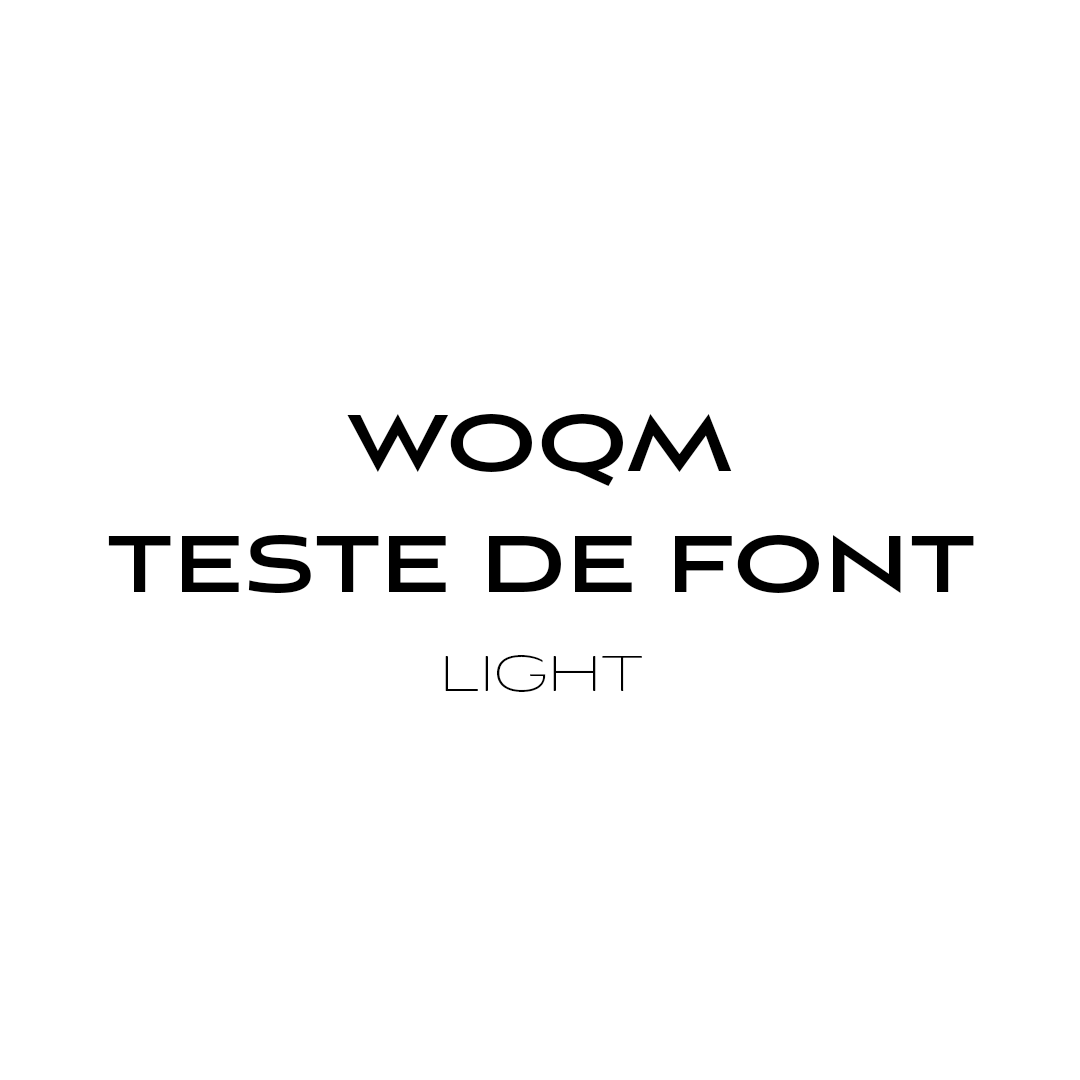
<style>
.page{position:relative;width:1080px;height:1080px;background:#ffffff}
.page>*{position:absolute;margin:0}
.t1{font:100.5px "AvianoSansBold";color:#000000;text-transform:uppercase}
.t2{font:62.3px "AvianoSansThin";color:#000000;text-transform:uppercase}
</style>
<div class="page">
<p class="t1" style="left:108px;top:414px;width:866px;height:179px;text-align:center">WOQM<br>TESTE DE FONT</p>
<p class="t2" style="left:445px;top:655px;width:197px;height:37px">LIGHT</p>
</div>
